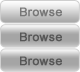
<style>
.page{position:relative;width:80px;height:72px}
.page>*{position:absolute;margin:0}
.t1{font:11.8px "ArialMT";letter-spacing:0.02em;color:#777777;font-weight:bold}
.t2{font:11.8px "ArialMT";letter-spacing:0.02em;color:#575757;font-weight:bold}
</style>
<div class="page">
<p class="t1" style="left:20px;top:7px;width:42px;height:10px">Browse</p>
<p class="t2" style="left:20px;top:32px;width:42px;height:10px">Browse</p>
<p class="t2" style="left:20px;top:56px;width:42px;height:10px">Browse</p>
</div>
